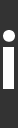
<style>
.page{position:relative;width:18px;height:128px;background:#333333}
.page>*{position:absolute;margin:0}
.t1{font:75px "AdobeGothicStd-Bold";color:#ffffff}
</style>
<div class="page">
<p class="t1" style="left:3px;top:30px;width:12px;height:59px">i</p>
</div>
